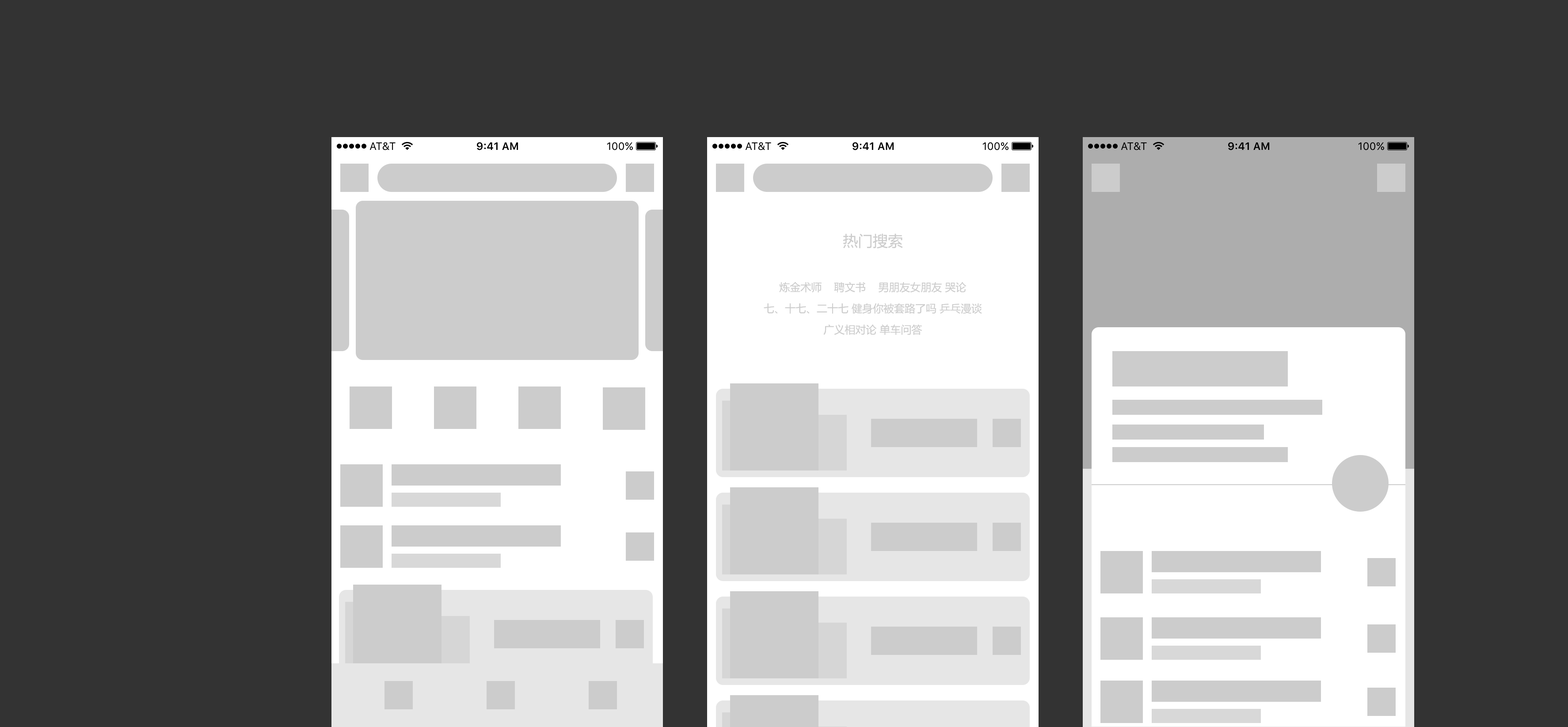
<style>
.page{position:relative;width:1568px;height:727px;background:#333333}
.page>*{position:absolute;margin:0}
.t1{font:15px "MicrosoftYaHei";color:#cccccc}
.t2{font:10.6px/21.2px "MicrosoftYaHei";color:#cccccc}
</style>
<div class="page">
<p class="t1" style="left:843px;top:233px;width:60px;height:15px">热门搜索</p>
<p class="t2" style="left:764px;top:282px;width:218px;height:53px;text-align:center">炼金术师    聘文书    男朋友女朋友 哭论<br>七、十七、二十七 健身你被套路了吗 乒乓漫谈<br>广义相对论 单车问答</p>
</div>
